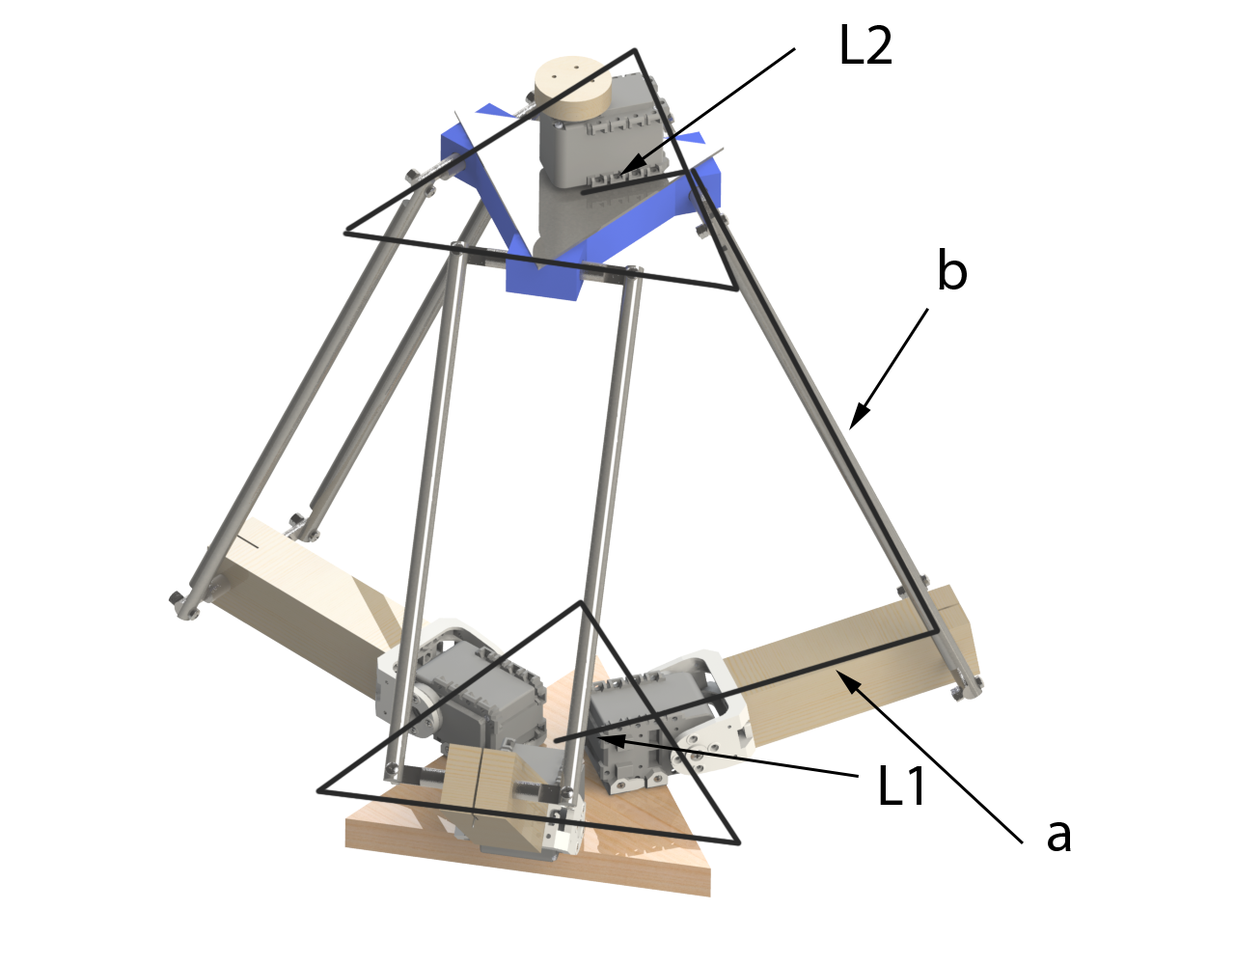
<style>
.page{position:relative;width:1235px;height:965px;background:#ffffff}
.page>*{position:absolute;margin:0}
.t1{font:57.9px "MyriadPro-Regular";color:#000000}
</style>
<div class="page">
<p class="t1" style="left:842px;top:24px;width:50px;height:40px">L2</p>
<p class="t1" style="left:939px;top:248px;width:28px;height:42px">b</p>
<p class="t1" style="left:880px;top:765px;width:42px;height:40px">L1</p>
<p class="t1" style="left:1048px;top:822px;width:23px;height:29px">a</p>
</div>
